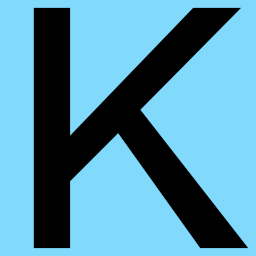
<style>
.page{position:relative;width:256px;height:256px;background:#81d9fb}
.page>*{position:absolute;margin:0}
.t1{font:300px "FZLTZHK--GBK1-0";color:#000000}
</style>
<div class="page">
<p class="t1" style="left:33px;top:7px;width:216px;height:242px">K</p>
</div>
